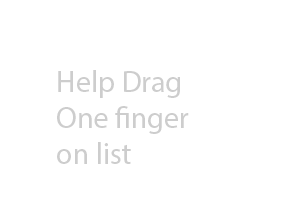
<style>
.page{position:relative;width:300px;height:200px;background:#ffffff}
.page>*{position:absolute;margin:0}
.t1{font:30px "MyriadPro-Regular";color:#cdcdcd}
</style>
<div class="page">
<p class="t1" style="left:57px;top:70px;width:132px;height:94px">Help Drag <br>One finger<br>on list</p>
</div>
